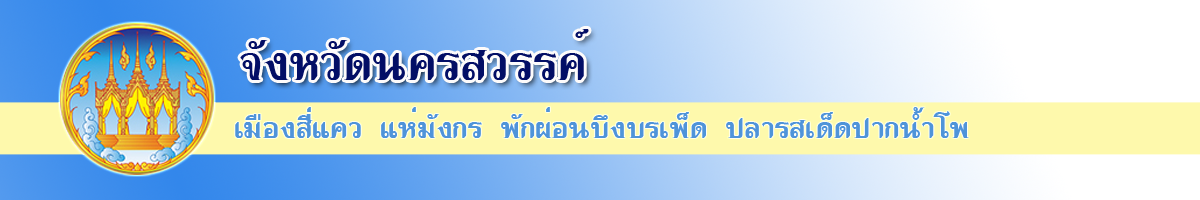
<style>
.page{position:relative;width:1200px;height:200px}
.page>*{position:absolute;margin:0}
.t1{font:64px "DSNNamKang";color:#030e66}
.t2{font:40px "DSNNamKang";color:#4f94d9}
</style>
<div class="page">
<p class="t1" style="left:240px;top:29px;width:349px;height:51px">จังหวัดนครสวรรค์</p>
<p class="t2" style="left:235px;top:107px;width:734px;height:31px">เมืองสี่แคว  แห่มังกร  พักผ่อนบึงบรเพ็ด  ปลารสเด็ดปากน้ำโพ</p>
</div>
